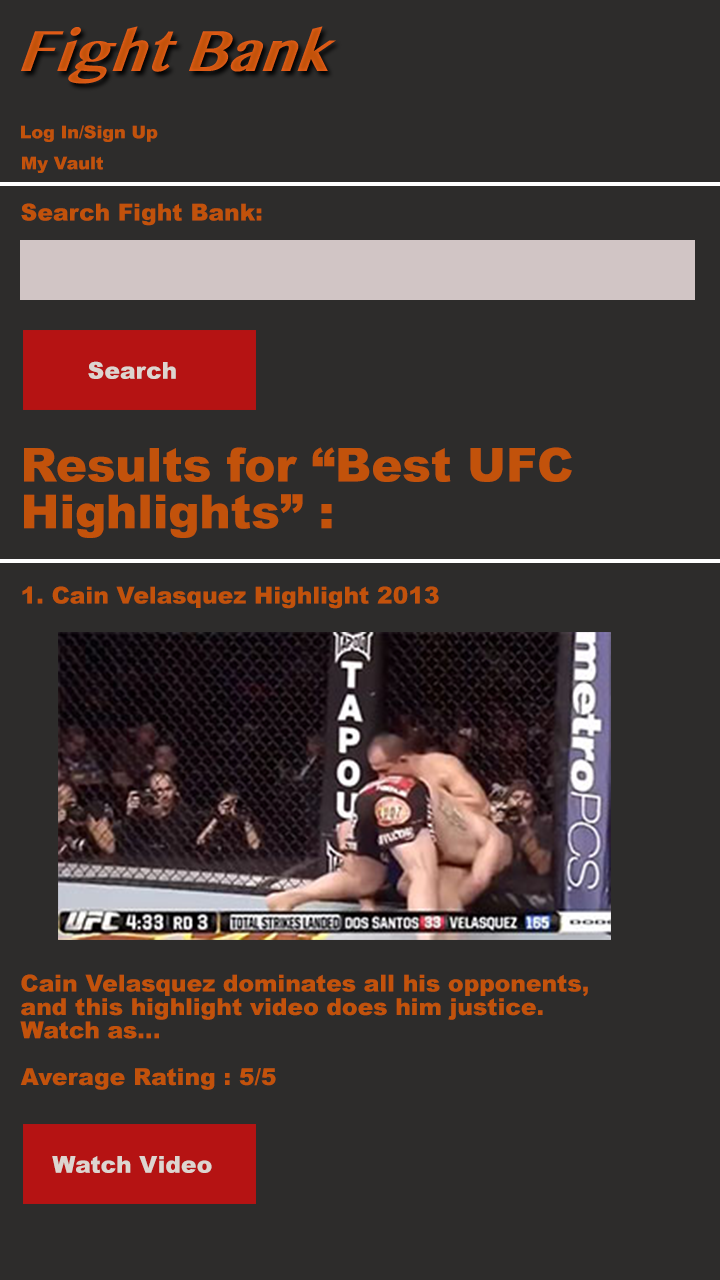
<style>
.page{position:relative;width:720px;height:1280px;background:#2d2c2b}
.page>*{position:absolute;margin:0}
.t1{font:17.5px "Arial-Black";color:#c2520b}
.t2{font:23.3px "Arial-Black";color:#c2520b}
.t3{font:23.3px "Arial-Black";color:#ddd5d0}
.t4{font:46.7px/23.3px "Arial-Black";color:#c2520b}
.t5{font:23.3px/23.3px "Arial-Black";color:#c2520b}
</style>
<div class="page">
<p class="t1" style="left:21px;top:125px;width:137px;height:17px">Log In/Sign Up</p>
<p class="t1" style="left:22px;top:156px;width:81px;height:17px">My Vault</p>
<p class="t2" style="left:21px;top:203px;width:241px;height:23px">Search Fight Bank:</p>
<p class="t3" style="left:88px;top:361px;width:88px;height:18px">Search</p>
<p class="t4" style="left:24px;top:447px;width:548px;height:91px">Results for “Best UFC<br><br>Highlights” :</p>
<p class="t2" style="left:22px;top:586px;width:417px;height:23px">1. Cain Velasquez Highlight 2013</p>
<p class="t5" style="left:20px;top:974px;width:568px;height:116px">Cain Velasquez dominates all his opponents,<br>and this highlight video does him justice.<br>Watch as...<br><br>Average Rating : 5/5</p>
<p class="t3" style="left:52px;top:1156px;width:160px;height:17px">Watch Video</p>
</div>
